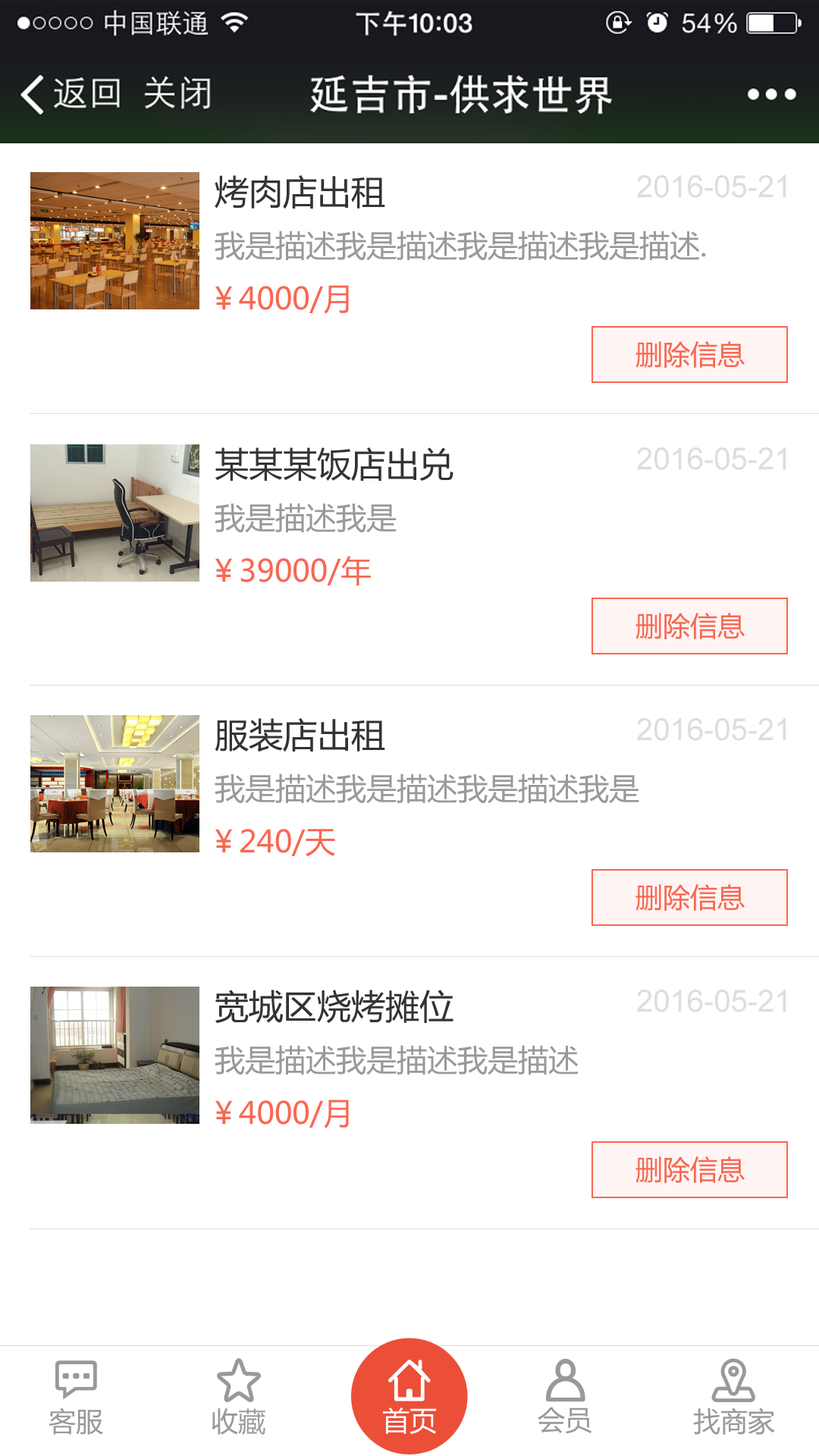
<style>
.page{position:relative;width:819px;height:1456px;background:#ffffff}
.page>*{position:absolute;margin:0}
.t1{font:34.1px "MicrosoftYaHei";color:#333333}
.t2{font:30.3px "ArialMT";color:#dddddd}
.t3{font:30.3px "MicrosoftYaHei";color:#999999}
.t4{font:30.3px "MicrosoftYaHei";color:#f96751}
.t5{font:27.3px "MicrosoftYaHei";color:#f96751}
.t6{font:27.3px "MicrosoftYaHei";color:#999999}
.t7{font:27.3px "MicrosoftYaHei";color:#ffffff}
</style>
<div class="page">
<p class="t1" style="left:215px;top:175px;width:170px;height:34px">烤肉店出租</p>
<p class="t2" style="left:637px;top:175px;width:149px;height:23px">2016-05-21</p>
<p class="t3" style="left:215px;top:231px;width:491px;height:30px">我是描述我是描述我是描述我是描述.</p>
<p class="t4" style="left:215px;top:285px;width:134px;height:29px">￥4000/月</p>
<p class="t5" style="left:635px;top:341px;width:110px;height:27px">删除信息</p>
<p class="t1" style="left:215px;top:447px;width:238px;height:34px">某某某饭店出兑</p>
<p class="t2" style="left:637px;top:447px;width:149px;height:23px">2016-05-21</p>
<p class="t3" style="left:215px;top:503px;width:182px;height:30px">我是描述我是</p>
<p class="t4" style="left:215px;top:556px;width:156px;height:30px">￥39000/年</p>
<p class="t5" style="left:635px;top:613px;width:110px;height:26px">删除信息</p>
<p class="t1" style="left:215px;top:718px;width:170px;height:34px">服装店出租</p>
<p class="t2" style="left:637px;top:718px;width:149px;height:23px">2016-05-21</p>
<p class="t3" style="left:215px;top:773px;width:424px;height:31px">我是描述我是描述我是描述我是</p>
<p class="t4" style="left:215px;top:829px;width:120px;height:28px">￥240/天</p>
<p class="t5" style="left:635px;top:884px;width:110px;height:27px">删除信息</p>
<p class="t1" style="left:215px;top:990px;width:238px;height:33px">宽城区烧烤摊位</p>
<p class="t2" style="left:637px;top:990px;width:149px;height:22px">2016-05-21</p>
<p class="t3" style="left:215px;top:1045px;width:364px;height:30px">我是描述我是描述我是描述</p>
<p class="t4" style="left:215px;top:1100px;width:134px;height:28px">￥4000/月</p>
<p class="t5" style="left:635px;top:1156px;width:110px;height:27px">删除信息</p>
<p class="t6" style="left:49px;top:1407px;width:54px;height:28px">客服</p>
<p class="t6" style="left:212px;top:1408px;width:53px;height:27px">收藏</p>
<p class="t7" style="left:383px;top:1407px;width:53px;height:27px">首页</p>
<p class="t6" style="left:538px;top:1407px;width:54px;height:27px">会员</p>
<p class="t6" style="left:693px;top:1407px;width:82px;height:28px">找商家</p>
</div>
